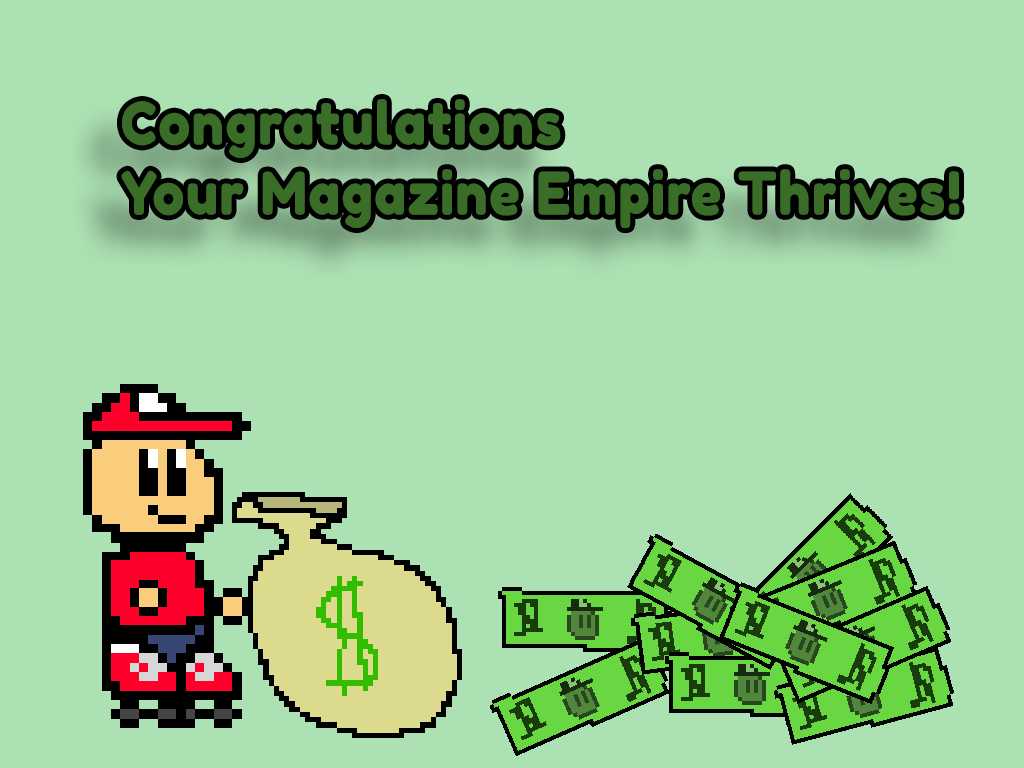
<style>
.page{position:relative;width:1024px;height:768px;background:#abe1b3}
.page>*{position:absolute;margin:0}
.t1{font:58.3px "FredokaOne-Regular";letter-spacing:0.01em;color:#3a6e28;font-weight:bold;scale:0.9 1}
</style>
<div class="page">
<p class="t1" style="left:121px;top:99px;width:839px;height:129px">Congratulations<br>Your Magazine Empire Thrives!</p>
</div>
